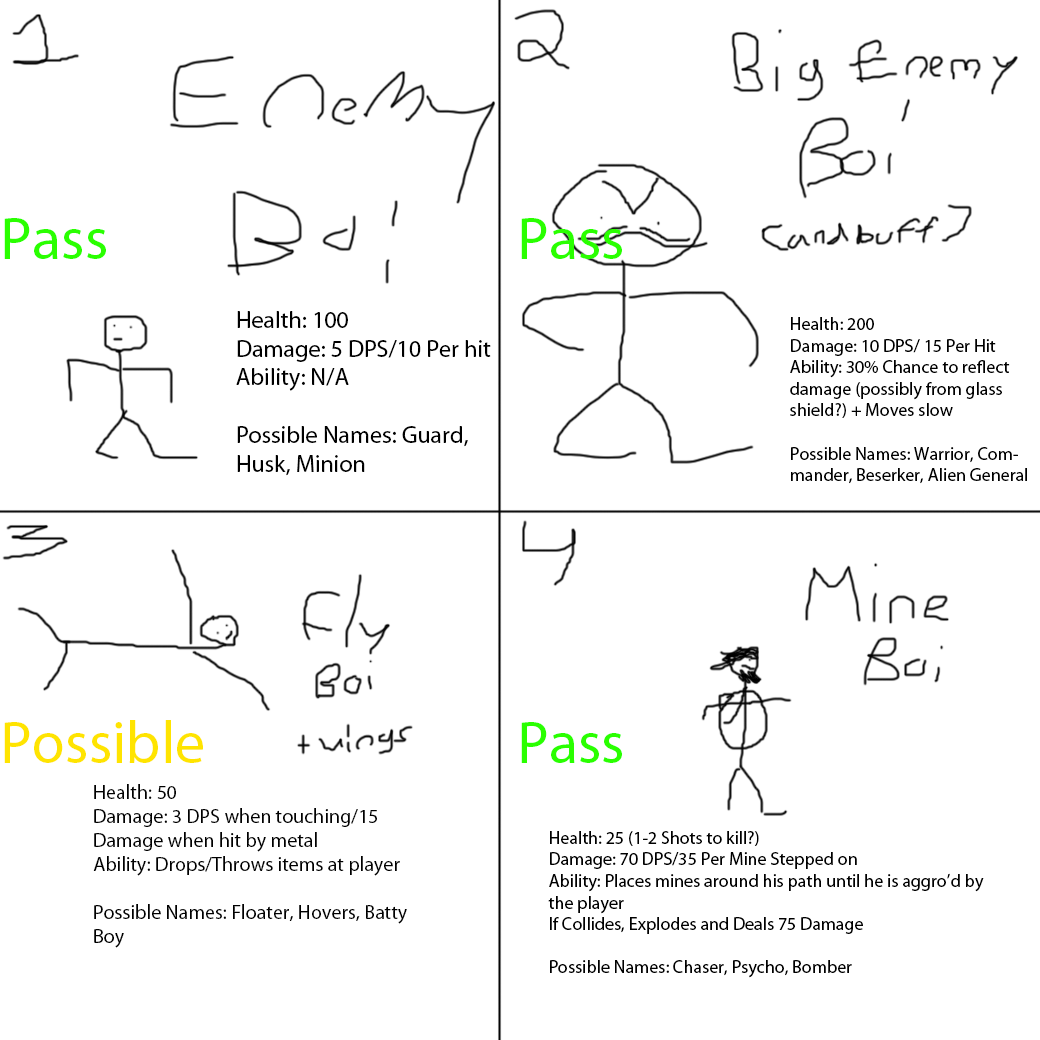
<style>
.page{position:relative;width:1040px;height:1040px;background:#ffffff}
.page>*{position:absolute;margin:0}
.t1{font:60px "MyriadPro-Regular";color:#2aff00}
.t2{font:60px "MyriadPro-Regular";color:#000000}
.t3{font:60px "MyriadPro-Regular";color:#ffe400}
.t4{font:24px "MyriadPro-Regular";color:#000000}
.t5{font:18px "MyriadPro-Regular";color:#000000}
.t6{font:20px "MyriadPro-Regular";color:#000000}
</style>
<div class="page">
<p class="t1" style="left:4px;top:218px;width:618px;height:545px"><span class="t2"><br><br><br></span>Pass            Pass<br><br><br><br><br><br><br><span class="t3">Possible          </span>Pass</p>
<p class="t4" style="left:236px;top:311px;width:255px;height:165px">Health: 100<br>Damage: 5 DPS/10 Per hit<br>Ability: N/A<br><br>Possible Names: Guard, Husk, Minion</p>
<p class="t5" style="left:790px;top:317px;width:237px;height:167px">Health: 200<br>Damage: 10 DPS/ 15 Per Hit<br>Ability: 30% Chance to reflect damage (possibly from glass shield?) + Moves slow<br><br>Possible Names: Warrior, Commander, Beserker, Alien General</p>
<p class="t6" style="left:93px;top:784px;width:314px;height:164px">Health: 50<br>Damage: 3 DPS when touching/15 Damage when hit by metal<br>Ability: Drops/Throws items at player<br><br>Possible Names: Floater, Hovers, Batty Boy</p>
<p class="t5" style="left:548px;top:831px;width:436px;height:147px">Health: 25 (1-2 Shots to kill?)<br>Damage: 70 DPS/35 Per Mine Stepped on<br>Ability: Places mines around his path until he is aggro’d by the player<br>If Collides, Explodes and Deals 75 Damage<br><br>Possible Names: Chaser, Psycho, Bomber</p>
</div>
